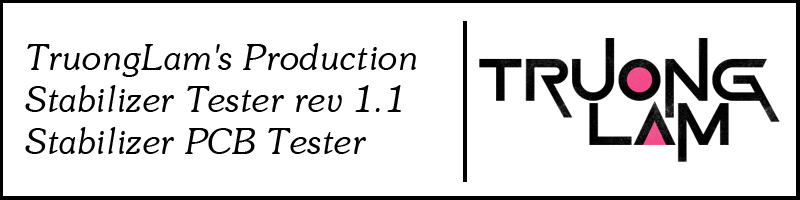
<style>
.page{position:relative;width:800px;height:200px;background:#ffffff}
.page>*{position:absolute;margin:0}
.t1{font:35px "UVNSaigonItalic";color:#000000}
</style>
<div class="page">
<p class="t1" style="left:25px;top:43px;width:391px;height:111px">TruongLam's Production<br>Stabilizer Tester rev 1.1<br>Stabilizer PCB Tester</p>
</div>
